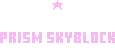
<style>
.page{position:relative;width:115px;height:53px;background:#ffffff}
.page>*{position:absolute;margin:0}
.t1{font:15px "MinecraftTen";letter-spacing:0.005em;color:#f5baef}
.t2{font:15px "MinecraftTen";letter-spacing:0.005em;color:#ffffff}
</style>
<div class="page">
<p class="t1" style="left:0px;top:14px;width:115px;height:29px;text-align:center"><span class="t2">WElcome to <br></span>prism skyblock</p>
</div>
